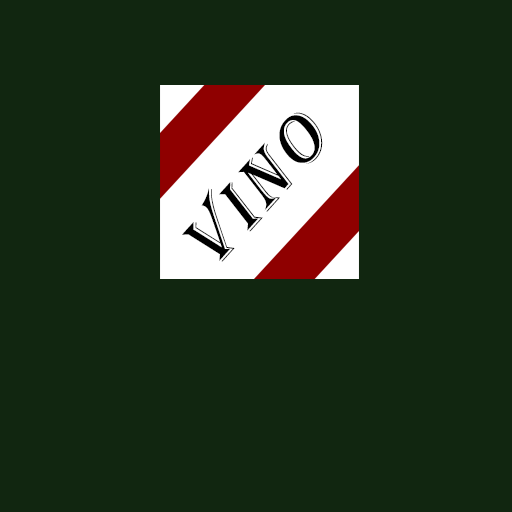
<style>
.page{position:relative;width:512px;height:512px;background:#112610}
.page>*{position:absolute;margin:0}
.t1{font:72px "Algerian";letter-spacing:0.1em;color:#000000;font-style:italic}
</style>
<div class="page">
<p class="t1" style="left:182px;top:112px;width:141px;height:150px;rotate:-48deg">VINO</p>
</div>
